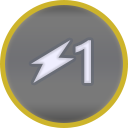
<style>
.page{position:relative;width:128px;height:128px;background:#ffffff}
.page>*{position:absolute;margin:0}
.t1{font:60px "SegoeUI-Semibold";color:#d8d7e6}
</style>
<div class="page">
<p class="t1" style="left:75px;top:40px;width:16px;height:43px">1</p>
</div>
